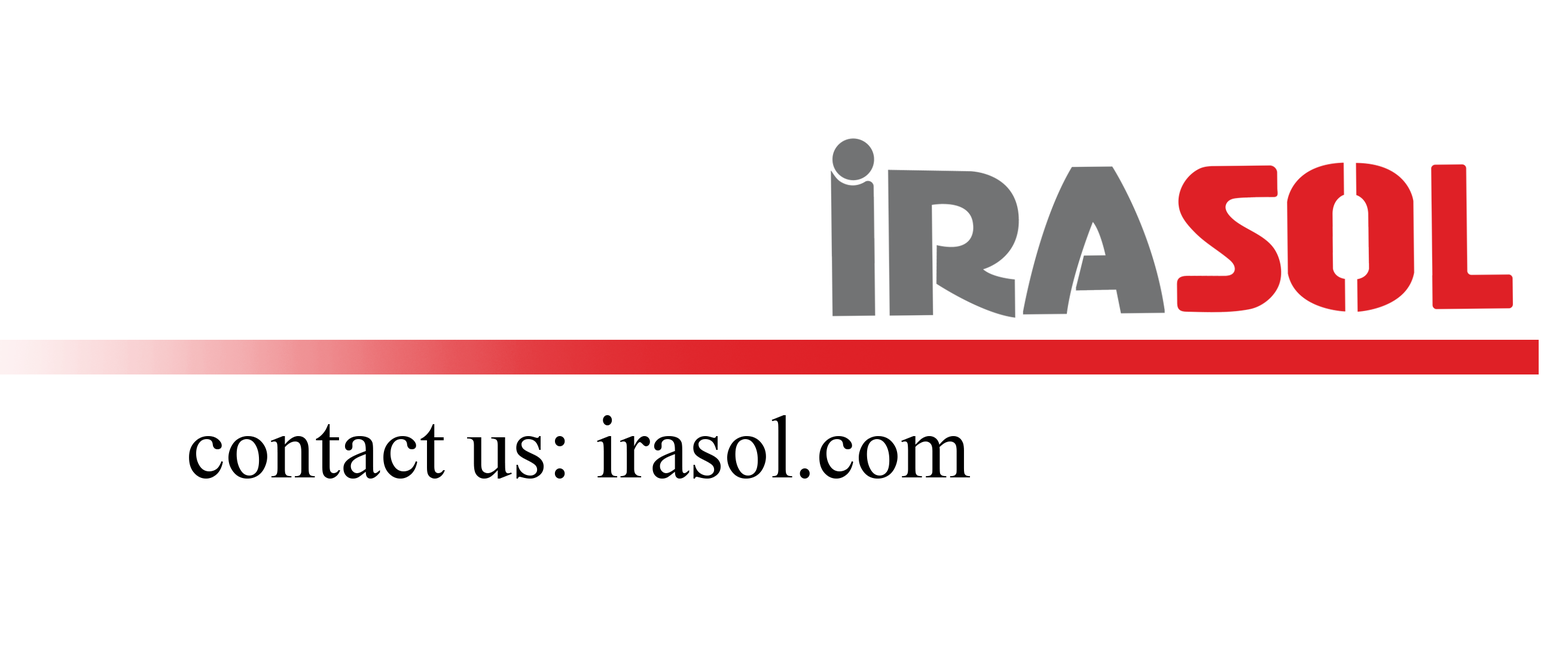
<style>
.page{position:relative;width:1568px;height:664px;background:#ffffff}
.page>*{position:absolute;margin:0}
.t1{font:89.7px "TimesNewRomanPSMT";color:#000000}
</style>
<div class="page">
<p class="t1" style="left:189px;top:415px;width:781px;height:63px">contact us: irasol.com</p>
</div>
